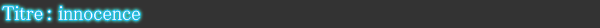
<style>
.page{position:relative;width:600px;height:28px;background:#333333}
.page>*{position:absolute;margin:0}
.t1{font:20px "MS-PMincho";color:#ffffff}
</style>
<div class="page">
<p class="t1" style="left:2px;top:6px;width:138px;height:15px">Titre : innocence</p>
</div>
